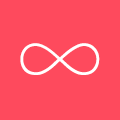
<style>
.page{position:relative;width:120px;height:120px;background:#fe4a5d}
.page>*{position:absolute;margin:0}
.t1{font:128px "HelveticaNeue-UltraLight";color:#ffffff}
</style>
<div class="page">
<p class="t1" style="left:20px;top:43px;width:80px;height:32px">∞</p>
</div>
